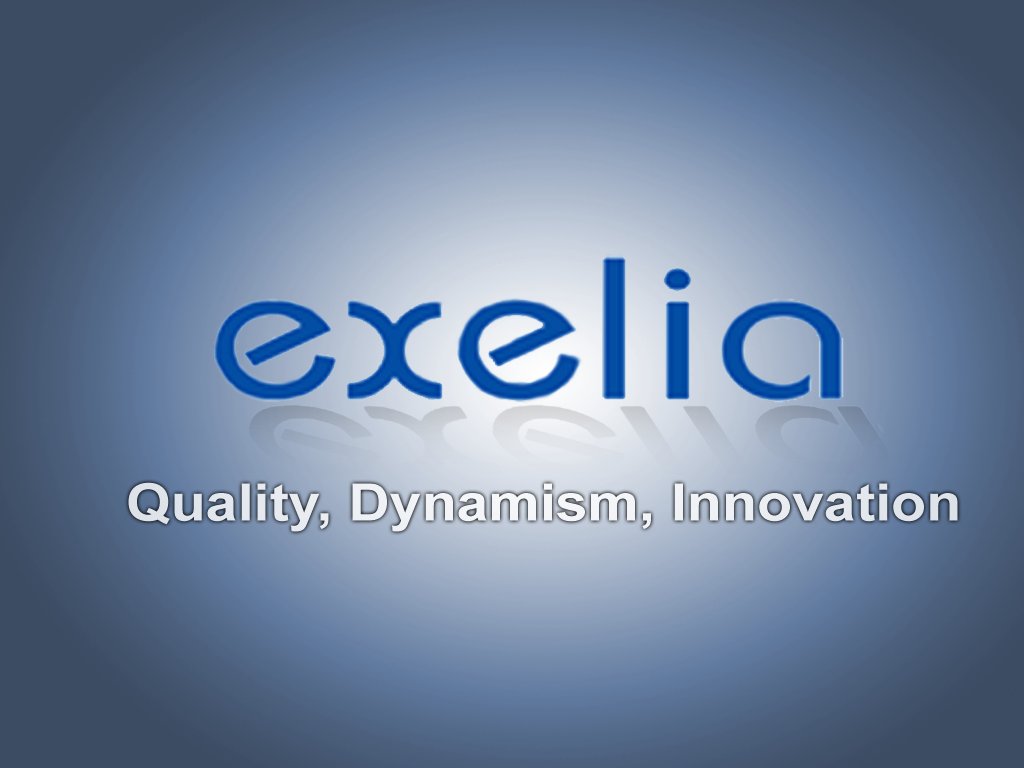
<style>
.page{position:relative;width:1024px;height:768px}
.page>*{position:absolute;margin:0}
.t1{font:51.8px "Arial-BoldMT";color:#fefefe;scale:1.11 1}
</style>
<div class="page">
<p class="t1" style="left:128px;top:482px;width:830px;height:50px;opacity:0.8">Quality, Dynamism, Innovation</p>
</div>
